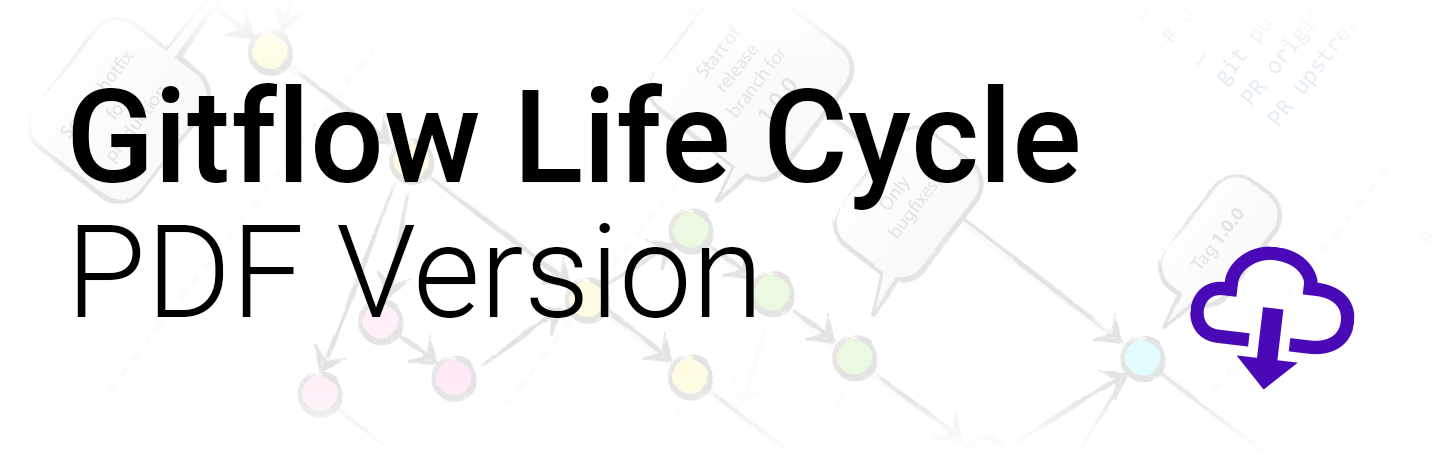
<style>
.page{position:relative;width:1438px;height:455px;background:#ffffff}
.page>*{position:absolute;margin:0}
.t1{font:130px "Roboto-Medium";color:#000000}
.t2{font:130px "Roboto-Light";color:#000000}
</style>
<div class="page">
<p class="t1" style="left:72px;top:83px;width:1006px;height:127px">Gitflow Life Cycle</p>
<p class="t2" style="left:77px;top:223px;width:677px;height:95px">PDF Version</p>
</div>
